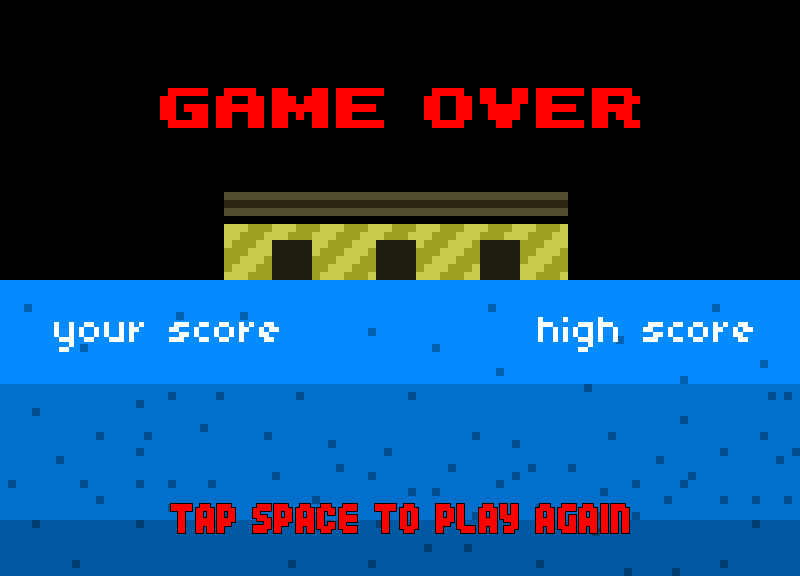
<style>
.page{position:relative;width:800px;height:576px;background:#000000}
.page>*{position:absolute;margin:0}
.t1{font:40px "04b03";color:#ffffff}
.t2{font:43px "04b25";color:#ff0000}
</style>
<div class="page">
<p class="t1" style="left:538px;top:317px;width:215px;height:35px">high score</p>
<p class="t1" style="left:54px;top:322px;width:225px;height:30px">your score</p>
<p class="t2" style="left:171px;top:504px;width:458px;height:29px">tap space to play again</p>
</div>
